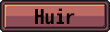
<style>
.page{position:relative;width:110px;height:32px}
.page>*{position:absolute;margin:0}
.t1{font:20.6px "mplus-1m-bold";color:#000000}
</style>
<div class="page">
<p class="t1" style="left:35px;top:8px;width:40px;height:17px">Huir</p>
</div>
